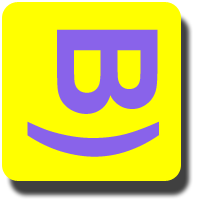
<style>
.page{position:relative;width:200px;height:200px;background:#ffff00}
.page>*{position:absolute;margin:0}
.t1{font:140px "Arial-BoldMT";letter-spacing:-0.025em;color:#8963ea}
</style>
<div class="page">
<p class="t1" style="left:27px;top:29px;width:132px;height:128px;rotate:90deg">B)</p>
</div>
